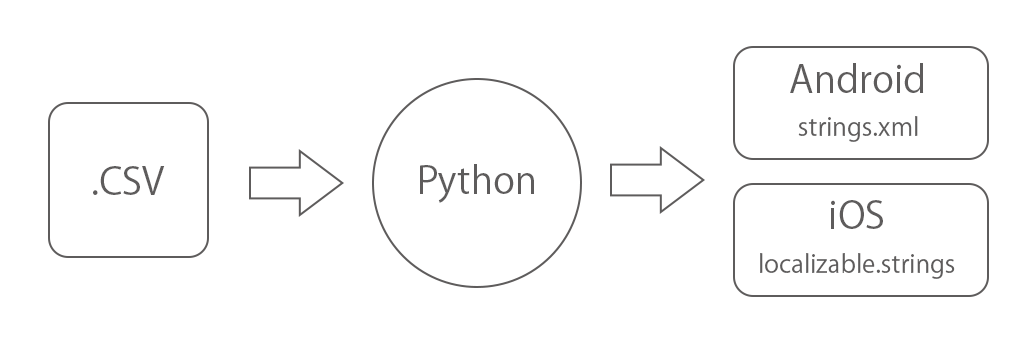
<style>
.page{position:relative;width:1024px;height:360px;background:#ffffff}
.page>*{position:absolute;margin:0}
.t1{font:37.5px "KozGoPr6N-Regular";color:#5e5c5c}
.t2{font:25px "KozGoPr6N-Regular";color:#5e5c5c}
</style>
<div class="page">
<p class="t1" style="left:790px;top:63px;width:134px;height:30px">Android</p>
<p class="t2" style="left:798px;top:116px;width:120px;height:26px">strings.xml</p>
<p class="t1" style="left:93px;top:166px;width:72px;height:29px">.CSV</p>
<p class="t1" style="left:420px;top:164px;width:114px;height:39px">Python</p>
<p class="t1" style="left:831px;top:200px;width:52px;height:29px">iOS</p>
<p class="t2" style="left:760px;top:253px;width:195px;height:26px">localizable.strings</p>
</div>
